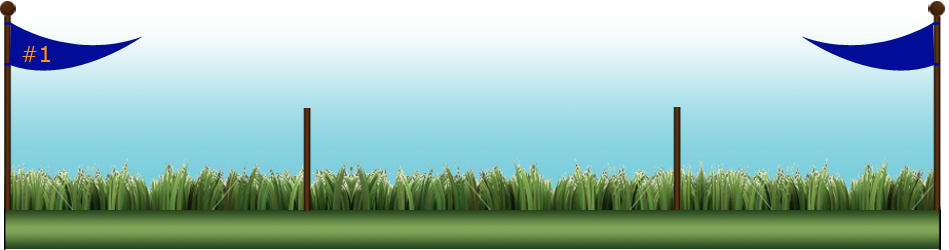
<style>
.page{position:relative;width:949px;height:250px}
.page>*{position:absolute;margin:0}
.t1{font:21.7px "Verdana";color:#ff9205}
</style>
<div class="page">
<p class="t1" style="left:22px;top:46px;width:28px;height:16px">#1</p>
</div>
